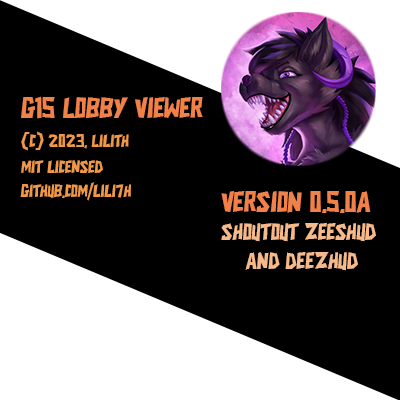
<style>
.page{position:relative;width:400px;height:400px;background:#000000}
.page>*{position:absolute;margin:0}
.t1{font:30px "CIKANDEI";color:#f08149}
.t2{font:18px "CIKANDEI";color:#ef9849}
.t3{font:24px "CIKANDEI";color:#f6b98a}
</style>
<div class="page">
<p class="t1" style="left:21px;top:96px;width:182px;height:23px">G15 Lobby Viewer</p>
<p class="t2" style="left:21px;top:131px;width:108px;height:20px">(C) 2023, Lilith</p>
<p class="t2" style="left:21px;top:160px;width:82px;height:13px">MIT licensed</p>
<p class="t2" style="left:20px;top:182px;width:111px;height:19px">github.com/lili7h</p>
<p class="t1" style="left:221px;top:191px;width:150px;height:22px">Version 0.5.0a</p>
<p class="t3" style="left:221px;top:223px;width:155px;height:48px;text-align:center">Shoutout Zeeshud <br>and Deezhud</p>
</div>
